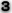
<style>
.page{position:relative;width:12px;height:13px}
.page>*{position:absolute;margin:0}
.t1{font:13.9px "K2D-ExtraBold";color:#000000}
</style>
<div class="page">
<p class="t1" style="left:1px;top:1px;width:9px;height:11px">3</p>
</div>
